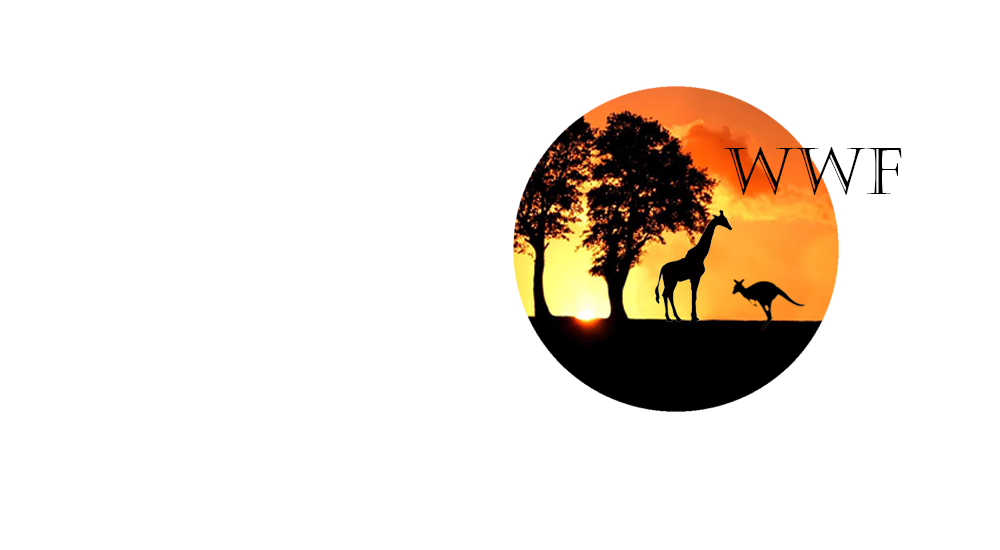
<style>
.page{position:relative;width:1000px;height:550px;background:#ffffff}
.page>*{position:absolute;margin:0}
.t1{font:65px "Castellar";color:#000000}
</style>
<div class="page">
<p class="t1" style="left:724px;top:147px;width:178px;height:48px">WWF</p>
</div>
